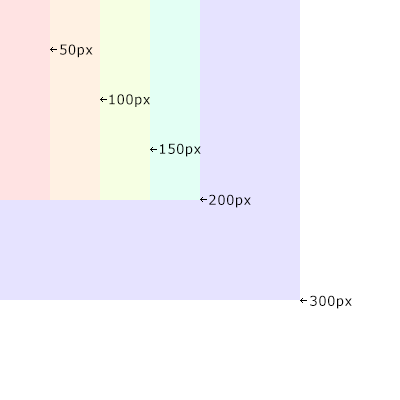
<style>
.page{position:relative;width:400px;height:400px;background:#ffffff}
.page>*{position:absolute;margin:0}
.t1{font:13.3px "Verdana";letter-spacing:0.025em;color:#000000}
</style>
<div class="page">
<p class="t1" style="left:60px;top:44px;width:33px;height:14px">50px</p>
<p class="t1" style="left:109px;top:94px;width:41px;height:13px">100px</p>
<p class="t1" style="left:160px;top:143px;width:41px;height:14px">150px</p>
<p class="t1" style="left:209px;top:194px;width:42px;height:14px">200px</p>
<p class="t1" style="left:310px;top:295px;width:42px;height:14px">300px</p>
</div>
